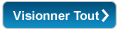
<style>
.page{position:relative;width:120px;height:30px}
.page>*{position:absolute;margin:0}
.t1{font:12.5px "Arial-BoldMT";color:#ffffff}
</style>
<div class="page">
<p class="t1" style="left:13px;top:11px;width:86px;height:9px">Visionner Tout</p>
</div>
